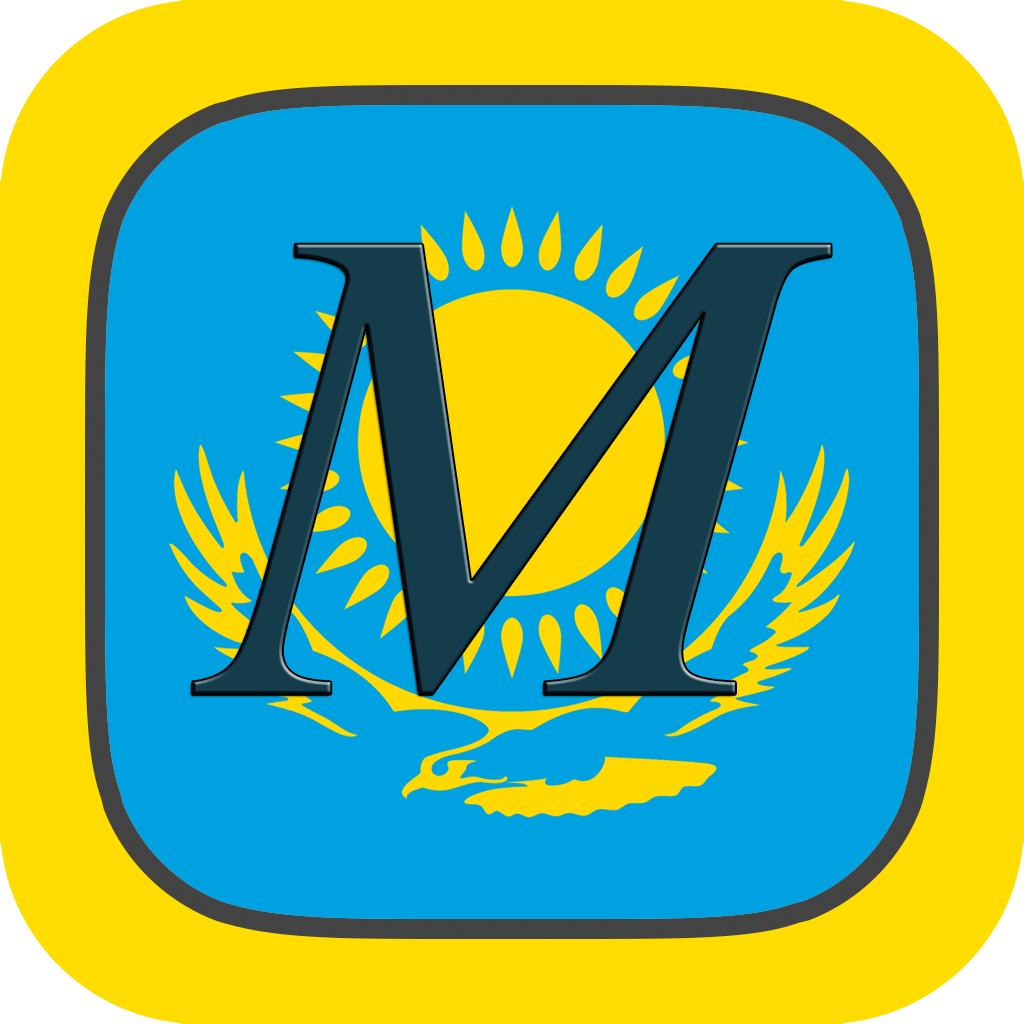
<style>
.page{position:relative;width:1024px;height:1024px;background:#00a1e1}
.page>*{position:absolute;margin:0}
.t1{font:688.1px "Times-Italic";color:#153c4b}
</style>
<div class="page">
<p class="t1" style="left:193px;top:244px;width:638px;height:450px">M</p>
</div>
